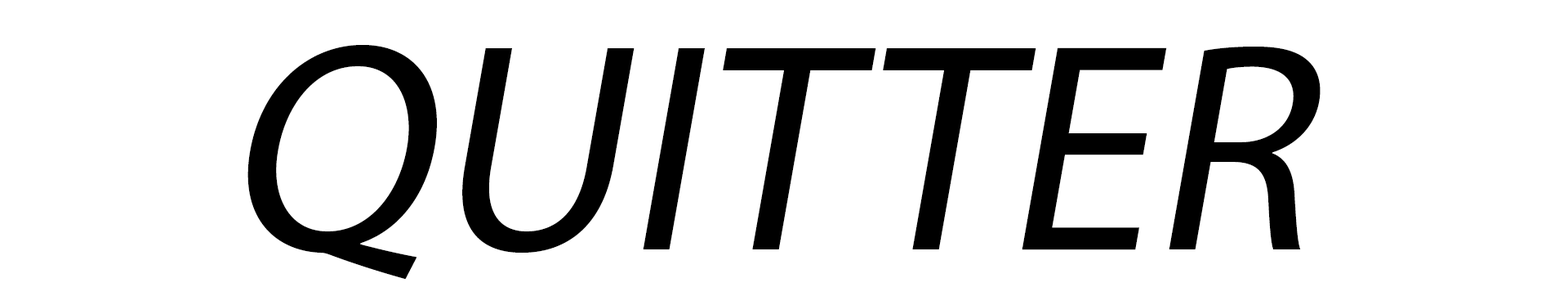
<style>
.page{position:relative;width:1568px;height:296px;background:#ffffff}
.page>*{position:absolute;margin:0}
.t1{font:298.2px "MyriadPro-Regular";color:#000000;font-style:italic}
</style>
<div class="page">
<p class="t1" style="left:247px;top:45px;width:1074px;height:234px">QUITTER</p>
</div>
